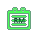
<style>
.page{position:relative;width:38px;height:38px;background:#ffffff}
.page>*{position:absolute;margin:0}
.t1{font:8px "Calibri";color:#065624}
</style>
<div class="page">
<p class="t1" style="left:14px;top:18px;width:11px;height:5px">RM</p>
</div>
